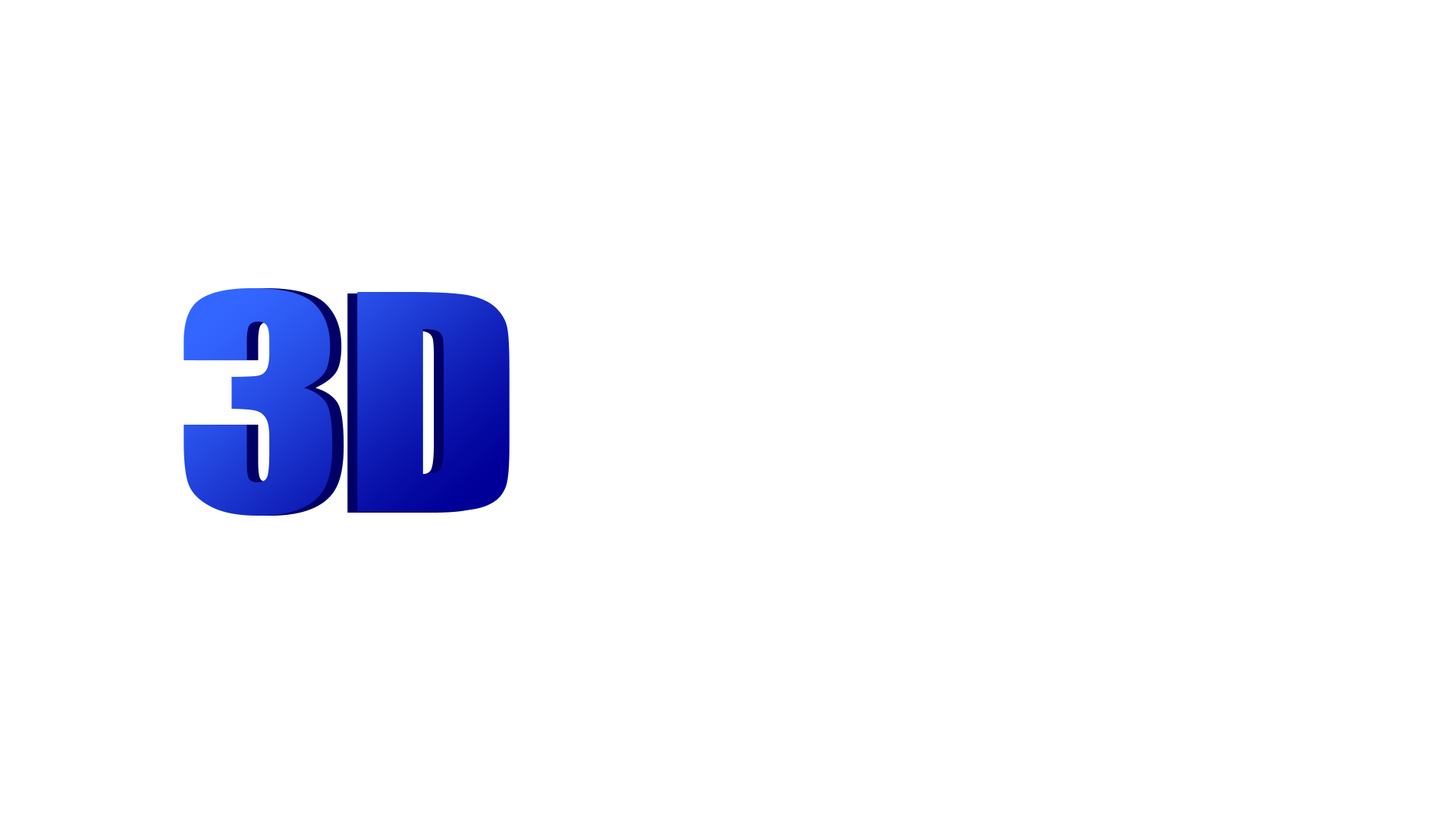
<style>
.page{position:relative;width:1456px;height:819px;background:#ffffff}
.page>*{position:absolute;margin:0}
.t1{font:276.5px "Impact";scale:1.15 1}
</style>
<div class="page">
<p class="t1" style="left:184px;top:288px;width:326px;height:228px">3D</p>
<p class="t1" style="left:195px;top:288px;width:149px;height:228px">3</p>
<p class="t1" style="left:347px;top:293px;width:153px;height:220px">D</p>
</div>
